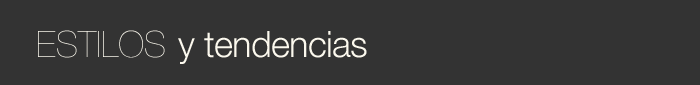
<style>
.page{position:relative;width:700px;height:85px;background:#333333}
.page>*{position:absolute;margin:0}
.t1{font:36.3px "HelveticaNeue-UltraLight"}
.t2{font:36.3px "HelveticaNeue-Light";letter-spacing:-0.02em;color:#fcf9ee}
</style>
<div class="page">
<p class="t1" style="left:38px;top:30px;width:127px;height:28px">ESTILOS</p>
<p class="t2" style="left:178px;top:31px;width:189px;height:33px">y tendencias</p>
</div>
